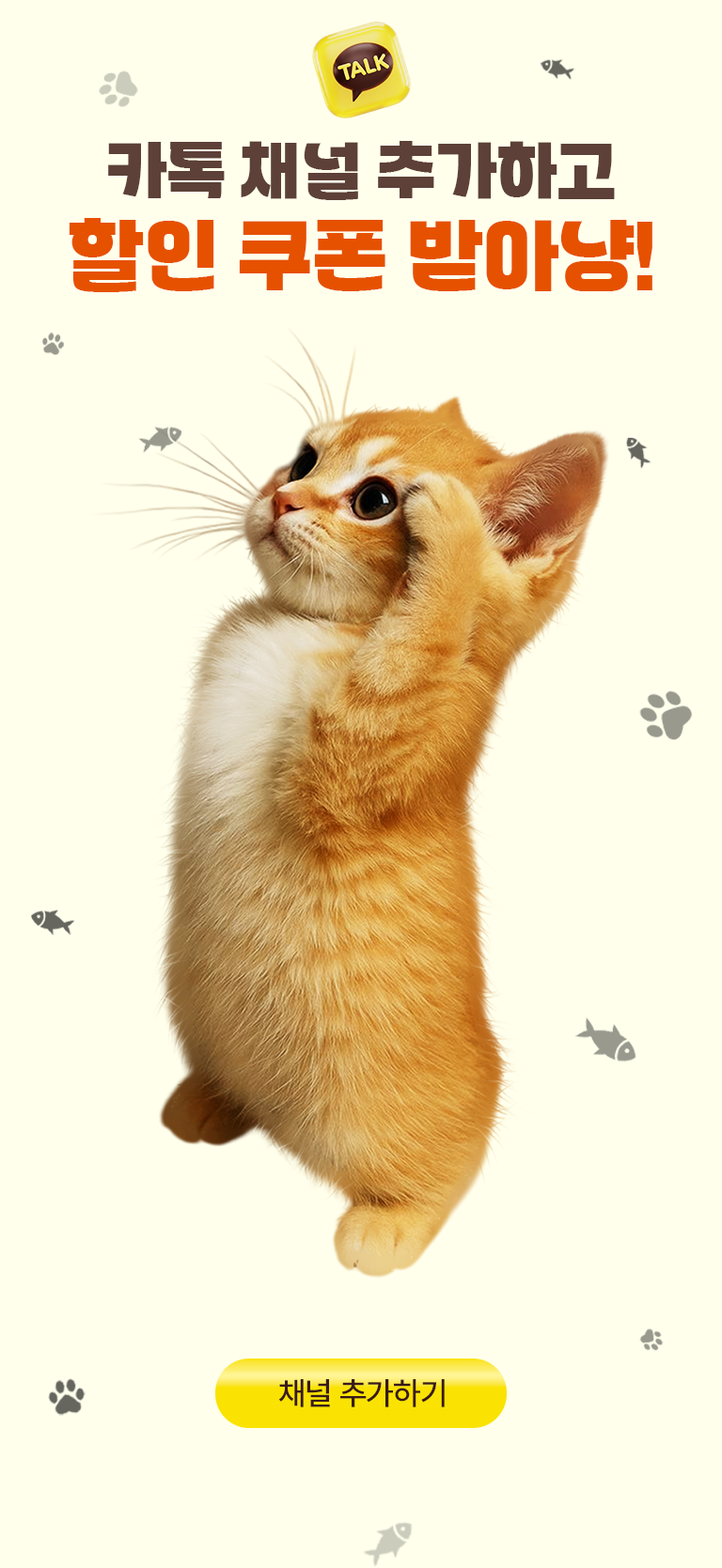
<style>
.page{position:relative;width:722px;height:1568px;background:#ffffec}
.page>*{position:absolute;margin:0}
.t1{font:65.8px "WAGURI-TTF";letter-spacing:-0.02em;color:#5d4037;text-transform:uppercase}
.t2{font:82.7px "WAGURI-TTF";letter-spacing:-0.02em;color:#e65100;text-transform:uppercase}
.t3{font:31.9px "Pretendard-Medium";letter-spacing:-0.02em;color:#391a1a;text-transform:uppercase}
</style>
<div class="page">
<p class="t1" style="left:108px;top:141px;width:506px;height:59px">카톡 채널 추가하고</p>
<p class="t2" style="left:69px;top:218px;width:583px;height:74px">할인 쿠폰 받아냥!</p>
<p class="t3" style="left:278px;top:1379px;width:166px;height:28px">채널 추가하기</p>
</div>
